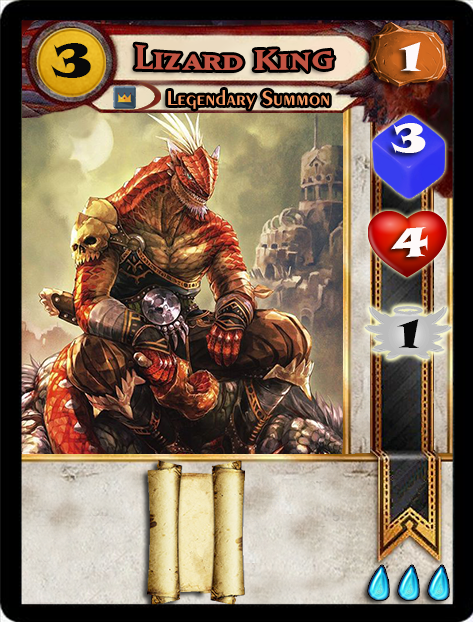
<style>
.page{position:relative;width:473px;height:622px}
.page>*{position:absolute;margin:0}
.t1{font:46.6px "SnapITC-Regular";color:#090909;scale:1.05 1}
.t2{font:40px "MatrixBoldSmallCaps";color:#c25443;scale:1.06 1}
.t3{font:40px "SnapITC-Regular";color:#fef9f9;scale:1.05 1}
.t4{font:21.3px "Exotic350BT-DemiBold";color:#f89c64;scale:1.06 1}
.t5{font:40px "SnapITC-Regular";color:#090909;scale:1.05 1}
</style>
<div class="page">
<p class="t1" style="left:51px;top:43px;width:40px;height:35px">3</p>
<p class="t2" style="left:135px;top:44px;width:199px;height:28px">Lizard King</p>
<p class="t3" style="left:399px;top:42px;width:22px;height:29px">1</p>
<p class="t4" style="left:168px;top:90px;width:161px;height:19px">Legendary Summon</p>
<p class="t3" style="left:391px;top:123px;width:35px;height:30px">3</p>
<p class="t3" style="left:391px;top:227px;width:37px;height:30px">4</p>
<p class="t5" style="left:397px;top:319px;width:22px;height:29px">1</p>
</div>
